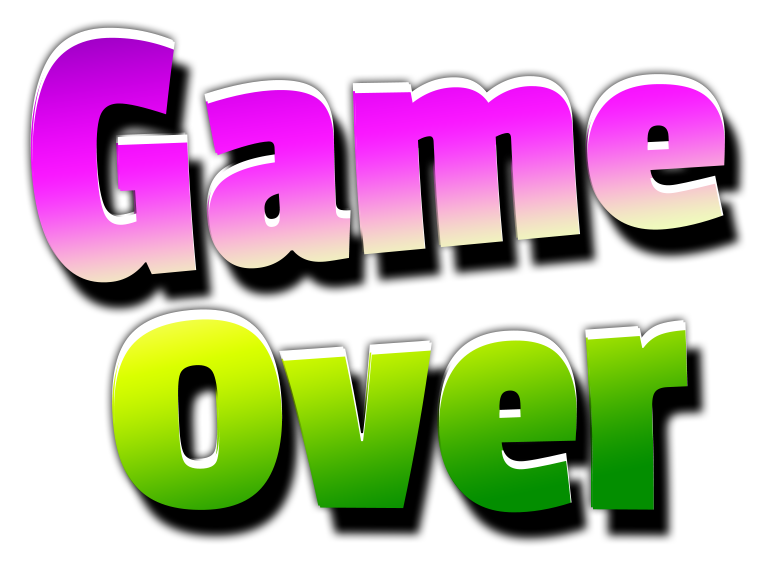
<style>
.page{position:relative;width:771px;height:568px;background:#ffffff}
.page>*{position:absolute;margin:0}
.t1{font:294.4px "PassionOne-Bold"}
</style>
<div class="page">
<p class="t1" style="left:30px;top:27px;width:693px;height:254px;rotate:-2deg">Game</p>
<p class="t1" style="left:32px;top:29px;width:693px;height:254px;rotate:-2deg">Game</p>
<p class="t1" style="left:112px;top:309px;width:574px;height:202px;rotate:-2deg">Over</p>
<p class="t1" style="left:114px;top:311px;width:574px;height:202px;rotate:-2deg">Over</p>
</div>
